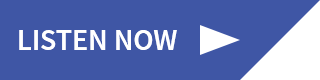
<style>
.page{position:relative;width:320px;height:80px;background:#3f56a5}
.page>*{position:absolute;margin:0}
.t1{font:30px "SourceSansPro-Semibold";color:#ffffff;text-transform:uppercase}
</style>
<div class="page">
<p class="t1" style="left:19px;top:30px;width:158px;height:20px">Listen Now</p>
<p class="t1" style="left:19px;top:30px;width:158px;height:20px">Listen Now</p>
</div>
